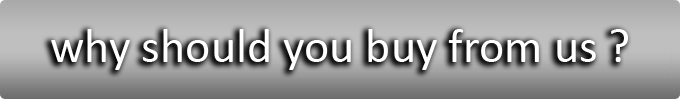
<style>
.page{position:relative;width:680px;height:99px}
.page>*{position:absolute;margin:0}
.t1{font:48px "Calibri";color:#ffffff}
</style>
<div class="page">
<p class="t1" style="left:51px;top:29px;width:577px;height:41px">why should you buy from us ?</p>
</div>
